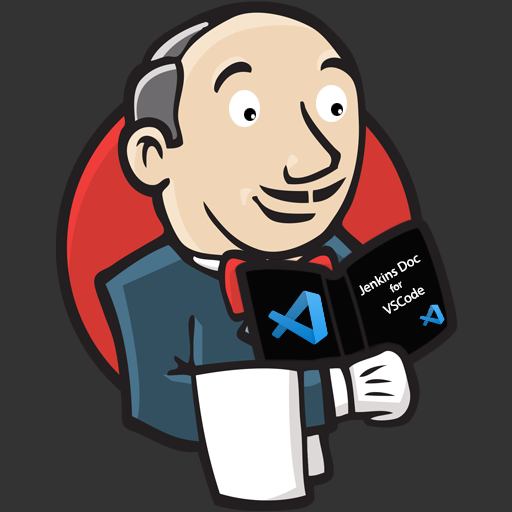
<style>
.page{position:relative;width:512px;height:512px;background:#333333}
.page>*{position:absolute;margin:0}
.t1{font:13.8px "MyriadPro-Regular";color:#ffffff}
.t2{font:11px "MyriadPro-Regular";color:#ffffff}
</style>
<div class="page">
<p class="t1" style="left:359px;top:255px;width:66px;height:59px;text-align:center;rotate:-30deg">Jenkins Doc<br><span class="t2">for <br></span>VSCode</p>
</div>
